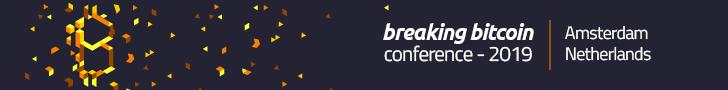
<style>
.page{position:relative;width:728px;height:90px;background:#232333}
.page>*{position:absolute;margin:0}
.t1{font:22.1px "Ubuntu-BoldItalic";letter-spacing:-0.04em;color:#ffffff}
.t2{font:18.1px "TitilliumWeb-Regular";letter-spacing:-0.04em;color:#ffffff}
.t3{font:21px "TitilliumWeb-Regular";letter-spacing:-0.04em;color:#ffffff}
</style>
<div class="page">
<p class="t1" style="left:383px;top:23px;width:151px;height:21px">breaking bitcoin</p>
<p class="t2" style="left:565px;top:26px;width:86px;height:35px">Amsterdam<br>Netherlands</p>
<p class="t3" style="left:384px;top:45px;width:148px;height:17px">conference - 2019</p>
</div>
